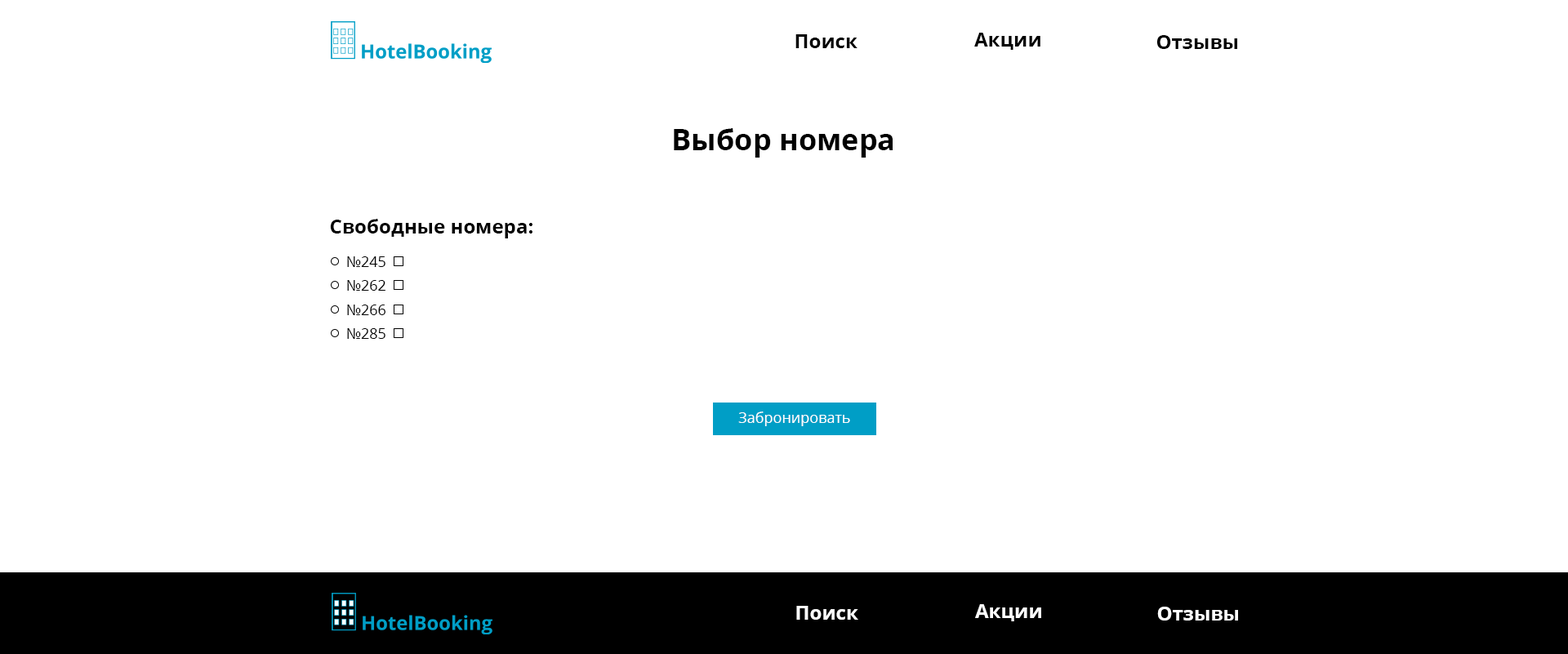
<style>
.page{position:relative;width:1568px;height:654px;background:#ffffff}
.page>*{position:absolute;margin:0}
.t1{font:19.6px "OpenSans-Bold";color:#000000}
.t2{font:29.4px "OpenSans-Bold";color:#000000}
.t3{font:14.7px "OpenSans-Regular";color:#000000}
.t4{font:14.7px "OpenSans-Regular";color:#ffffff}
.t5{font:19.6px "OpenSans-Bold";color:#ffffff}
</style>
<div class="page">
<p class="t1" style="left:795px;top:34px;width:63px;height:14px">Поиск</p>
<p class="t1" style="left:974px;top:33px;width:66px;height:17px">Акции</p>
<p class="t1" style="left:1156px;top:35px;width:81px;height:14px">Отзывы</p>
<p class="t2" style="left:674px;top:128px;width:219px;height:30px">Выбор номера</p>
<p class="t1" style="left:330px;top:219px;width:202px;height:19px">Свободные номера:</p>
<p class="t3" style="left:347px;top:256px;width:38px;height:11px">№245</p>
<p class="t3" style="left:347px;top:280px;width:38px;height:11px">№262</p>
<p class="t3" style="left:347px;top:305px;width:38px;height:10px">№266</p>
<p class="t3" style="left:347px;top:328px;width:38px;height:11px">№285</p>
<p class="t4" style="left:738px;top:412px;width:112px;height:14px">Забронировать</p>
<p class="t5" style="left:796px;top:606px;width:62px;height:14px">Поиск</p>
<p class="t5" style="left:975px;top:604px;width:66px;height:17px">Акции</p>
<p class="t5" style="left:1157px;top:607px;width:81px;height:14px">Отзывы</p>
</div>
